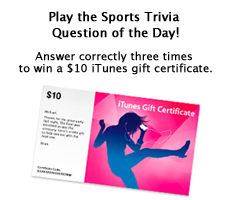
<style>
.page{position:relative;width:230px;height:200px;background:#ffffff}
.page>*{position:absolute;margin:0}
.t1{font:10.7px "LucidaSans";letter-spacing:0.005em;color:#000000;font-weight:bold}
.t2{font:12px "LucidaSans";letter-spacing:0.005em;color:#000000;font-weight:bold}
.t3{font:13.3px "LucidaSans";letter-spacing:0.005em;color:#000000;font-weight:bold}
</style>
<div class="page">
<p class="t1" style="left:19px;top:11px;width:193px;height:64px;text-align:center"><span class="t2">Play the Sports Trivia <br>Question of the Day</span><span class="t3">!<br><br></span>Answer correctly three times <br>to win a $10 iTunes gift certificate.</p>
</div>
